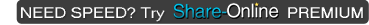
<style>
.page{position:relative;width:369px;height:25px;background:#3d3d3d}
.page>*{position:absolute;margin:0}
.t1{font:15px "MS Sans Serif";color:#ffffff;scale:1.12 1}
</style>
<div class="page">
<p class="t1" style="left:21px;top:7px;width:342px;height:15px">NEED SPEED? Try                          PREMIUM</p>
</div>
